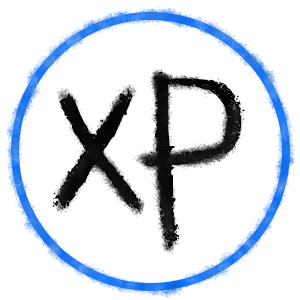
<style>
.page{position:relative;width:300px;height:300px;background:#ffffff}
.page>*{position:absolute;margin:0}
.t1{font:224.8px "DKCrayonCrumble";color:#000000}
</style>
<div class="page">
<p class="t1" style="left:52px;top:71px;width:194px;height:179px">xP</p>
</div>
